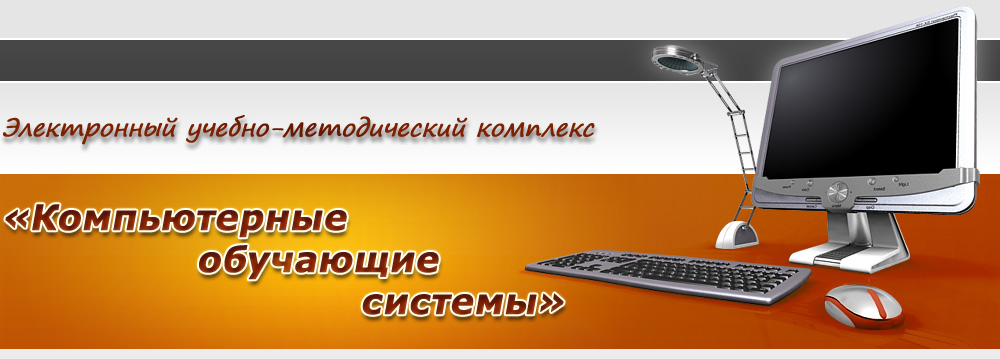
<style>
.page{position:relative;width:1000px;height:359px}
.page>*{position:absolute;margin:0}
.t1{font:24px "SegoePrint";color:#7e2102;font-weight:bold;font-style:italic}
.t2{font:35px "Verdana-Bold";color:#6d1509;font-weight:bold;font-style:italic}
</style>
<div class="page">
<p class="t1" style="left:3px;top:115px;width:592px;height:30px">Электронный учебно-методический комплекс</p>
<p class="t2" style="left:5px;top:204px;width:559px;height:111px;text-align:center">«Компьютерные <br>           обучающие <br>          системы»</p>
</div>
